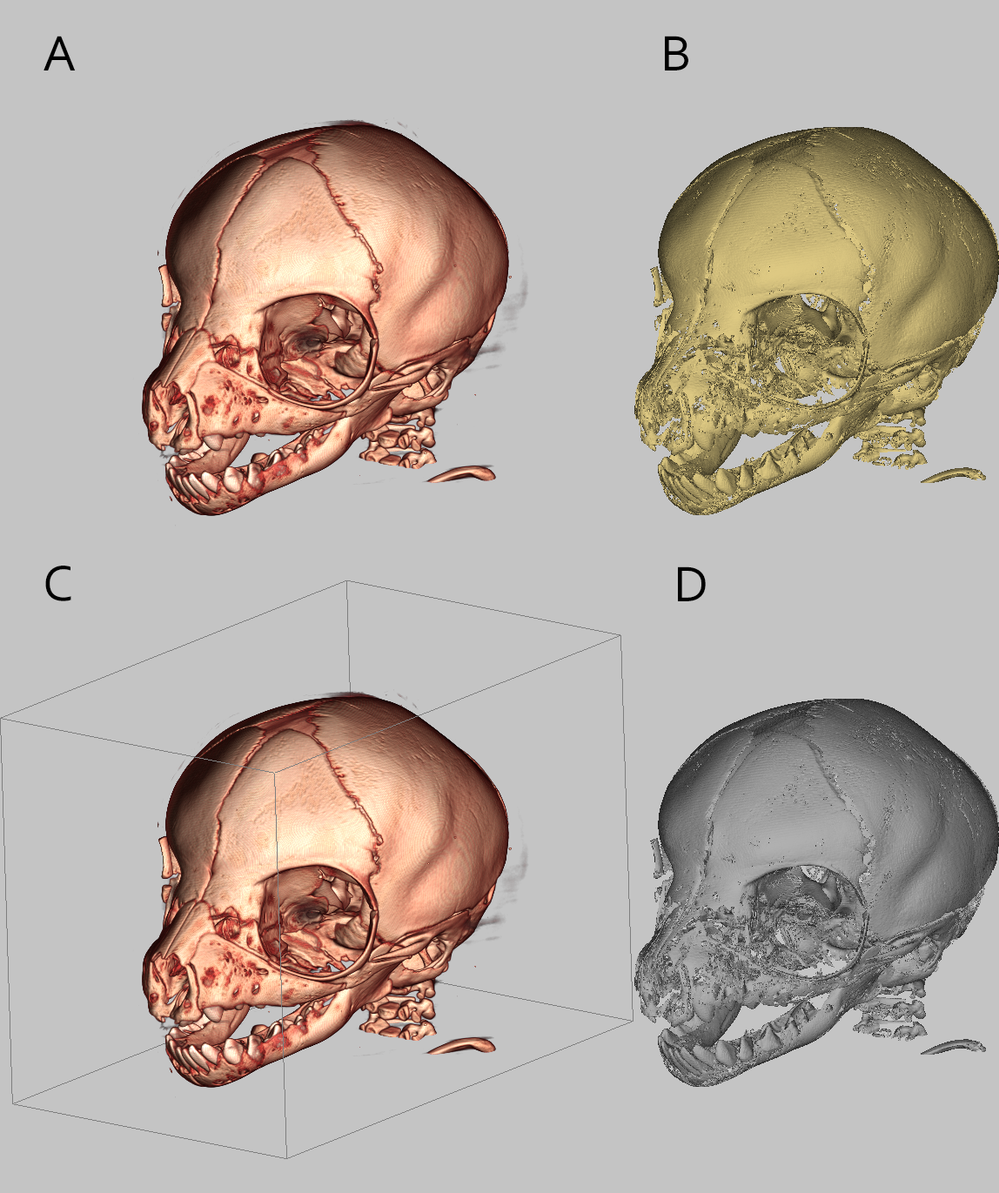
<style>
.page{position:relative;width:999px;height:1193px;background:#c4c4c4}
.page>*{position:absolute;margin:0}
.t1{font:52.2px "Corbel";color:#000000}
</style>
<div class="page">
<p class="t1" style="left:44px;top:36px;width:32px;height:35px">A</p>
<p class="t1" style="left:665px;top:36px;width:23px;height:35px">B</p>
<p class="t1" style="left:45px;top:566px;width:26px;height:35px">C</p>
<p class="t1" style="left:678px;top:567px;width:28px;height:34px">D</p>
</div>
